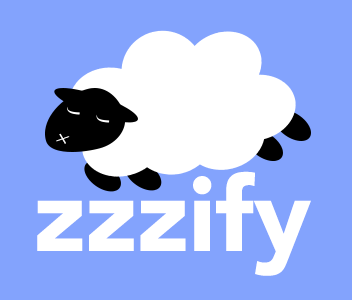
<style>
.page{position:relative;width:352px;height:300px;background:#83a3fd}
.page>*{position:absolute;margin:0}
.t1{font:25.7px "Avenir-Light";color:#ffffff;scale:0.85 1}
.t2{font:103px "Avenir-Black";color:#ffffff}
</style>
<div class="page">
<p class="t1" style="left:56px;top:133px;width:14px;height:11px;rotate:60deg">+</p>
<p class="t2" style="left:37px;top:171px;width:274px;height:105px">zzzify</p>
</div>
